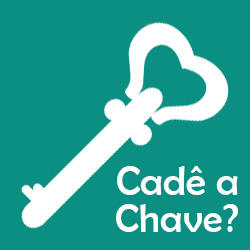
<style>
.page{position:relative;width:250px;height:250px;background:#0b8f82}
.page>*{position:absolute;margin:0}
.t1{font:41.3px "BerlinSansFB-Reg";color:#ffffff}
.t2{font:40.4px "BerlinSansFB-Reg";color:#ffffff}
</style>
<div class="page">
<p class="t1" style="left:117px;top:166px;width:121px;height:29px">Cadê a</p>
<p class="t2" style="left:116px;top:204px;width:122px;height:28px">Chave?</p>
</div>
